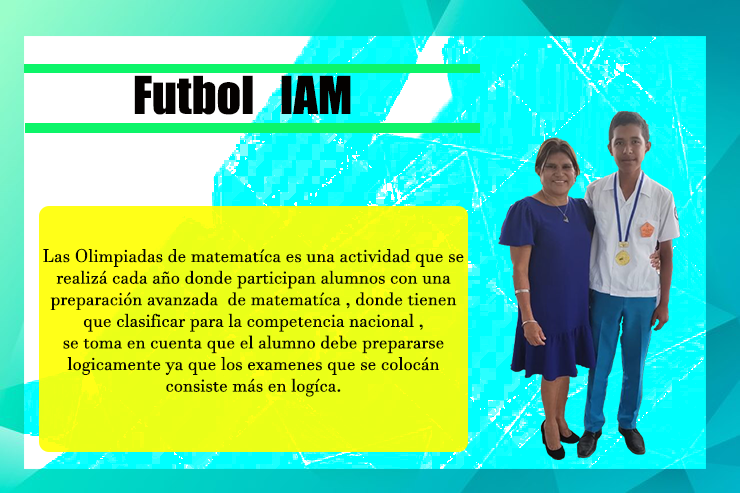
<style>
.page{position:relative;width:740px;height:493px}
.page>*{position:absolute;margin:0}
.t1{font:48px "Impact";color:#040100}
.t2{font:18px "JavaneseText";color:#080800}
.t3{font:18px "JavaneseText";color:#f5ed0c}
</style>
<div class="page">
<p class="t1" style="left:134px;top:75px;width:217px;height:40px">Futbol   IAM</p>
<p class="t2" style="left:43px;top:248px;width:421px;height:149px;text-align:center"><span class="t3"> <br></span><br>Las Olimpiadas de matematíca es una actividad que se realizá cada año donde participan alumnos con una preparación avanzada  de matematíca , donde tienen que clasificar para la competencia nacional , <br>se toma en cuenta que el alumno debe prepararse logicamente ya que los examenes que se colocán consiste más en logíca.</p>
</div>
